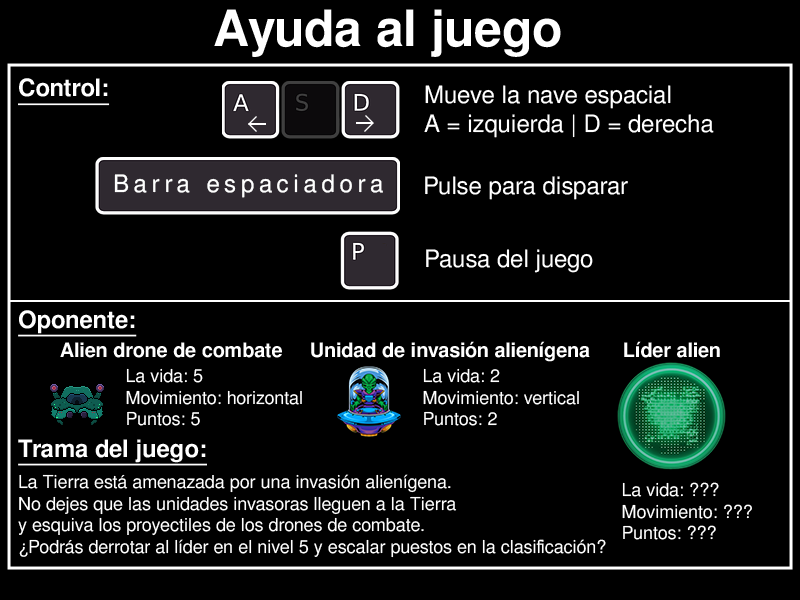
<style>
.page{position:relative;width:800px;height:600px;background:#000000}
.page>*{position:absolute;margin:0}
.t1{font:50px "FreeSansBold";color:#ffffff}
.t2{font:24px "FreeSansBold";color:#ffffff;text-decoration:underline}
.t3{font:24px "FreeSans";color:#ffffff}
.t4{font:24px "FreeSans";letter-spacing:0.2em;color:#ffffff}
.t5{font:20px "FreeSansBold";color:#ffffff}
.t6{font:18px "FreeSans";color:#ffffff}
</style>
<div class="page">
<p class="t1" style="left:214px;top:9px;width:347px;height:48px">Ayuda al juego</p>
<p class="t2" style="left:18px;top:78px;width:92px;height:28px">Control:</p>
<p class="t3" style="left:424px;top:85px;width:290px;height:53px">Mueve la nave espacial <br>A = izquierda | D = derecha</p>
<p class="t4" style="left:114px;top:174px;width:269px;height:24px">Barra espaciadora</p>
<p class="t3" style="left:425px;top:176px;width:203px;height:24px">Pulse para disparar</p>
<p class="t3" style="left:426px;top:249px;width:167px;height:24px">Pausa del juego</p>
<p class="t2" style="left:18px;top:310px;width:119px;height:27px">Oponente:</p>
<p class="t5" style="left:60px;top:342px;width:222px;height:16px">Alien drone de combate</p>
<p class="t5" style="left:311px;top:341px;width:279px;height:21px">Unidad de invasión alienígena</p>
<p class="t5" style="left:624px;top:341px;width:96px;height:17px">Líder alien</p>
<p class="t6" style="left:126px;top:368px;width:176px;height:58px">La vida: 5<br>Movimiento: horizontal<br>Puntos: 5</p>
<p class="t6" style="left:423px;top:368px;width:156px;height:58px">La vida: 2<br>Movimiento: vertical<br>Puntos: 2</p>
<p class="t2" style="left:18px;top:439px;width:189px;height:27px">Trama del juego:</p>
<p class="t6" style="left:18px;top:474px;width:588px;height:84px">La Tierra está amenazada por una invasión alienígena. <br>No dejes que las unidades invasoras lleguen a la Tierra <br>y esquiva los proyectiles de los drones de combate. <br>¿Podrás derrotar al líder en el nivel 5 y escalar puestos en la clasificación?</p>
<p class="t6" style="left:622px;top:482px;width:130px;height:58px">La vida: ???<br>Movimiento: ???<br>Puntos: ???</p>
</div>
